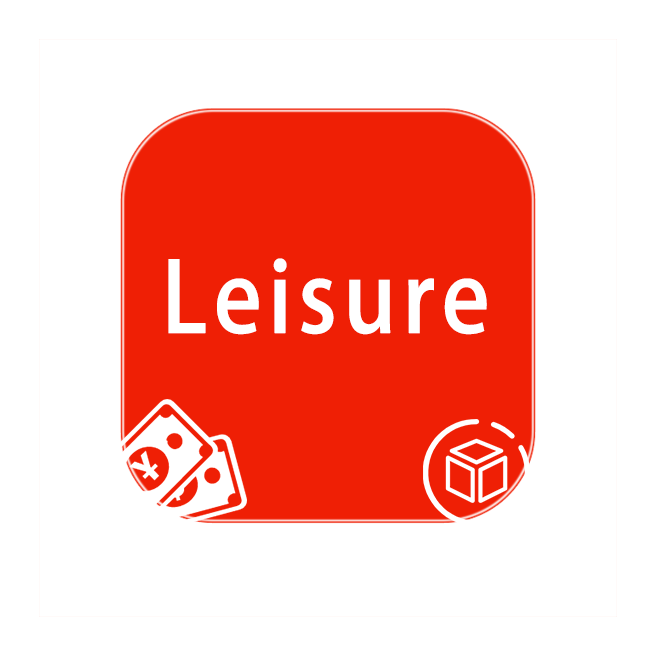
<style>
.page{position:relative;width:656px;height:656px;background:#ffffff}
.page>*{position:absolute;margin:0}
.t1{font:95.9px "AdobeHeitiStd-Regular";letter-spacing:0.05em;color:#ffffff;font-weight:bold;scale:0.92 1}
</style>
<div class="page">
<p class="t1" style="left:168px;top:258px;width:319px;height:77px">Leisure</p>
</div>
